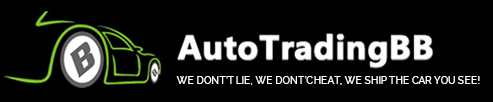
<style>
.page{position:relative;width:493px;height:102px;background:#000000}
.page>*{position:absolute;margin:0}
.t1{font:10.2px "Raleway-Medium";color:#ffffff}
</style>
<div class="page">
<p class="t1" style="left:176px;top:76px;width:304px;height:9px">WE DONT’T LIE, WE DONT’CHEAT, WE SHIP THE CAR YOU SEE!</p>
</div>
